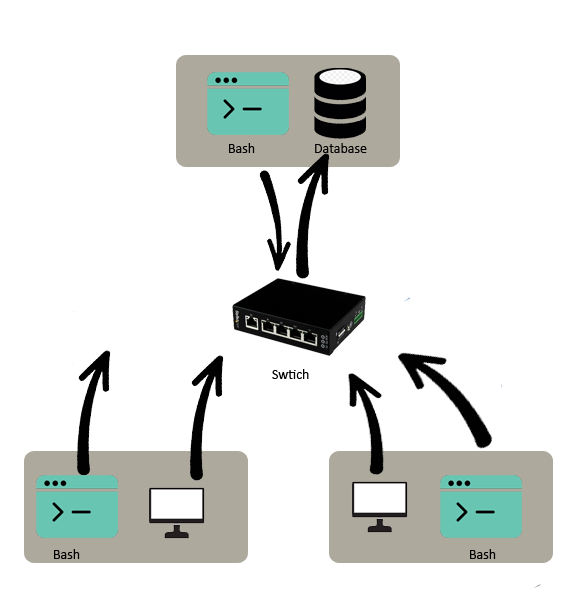
<style>
.page{position:relative;width:578px;height:607px;background:#ffffff}
.page>*{position:absolute;margin:0}
.t1{font:14px "Calibri";color:#000000}
</style>
<div class="page">
<p class="t1" style="left:229px;top:143px;width:26px;height:10px">Bash</p>
<p class="t1" style="left:315px;top:143px;width:52px;height:10px">Database</p>
<p class="t1" style="left:272px;top:369px;width:37px;height:10px">Swtich</p>
<p class="t1" style="left:54px;top:549px;width:26px;height:10px">Bash</p>
<p class="t1" style="left:470px;top:549px;width:26px;height:10px">Bash</p>
</div>
